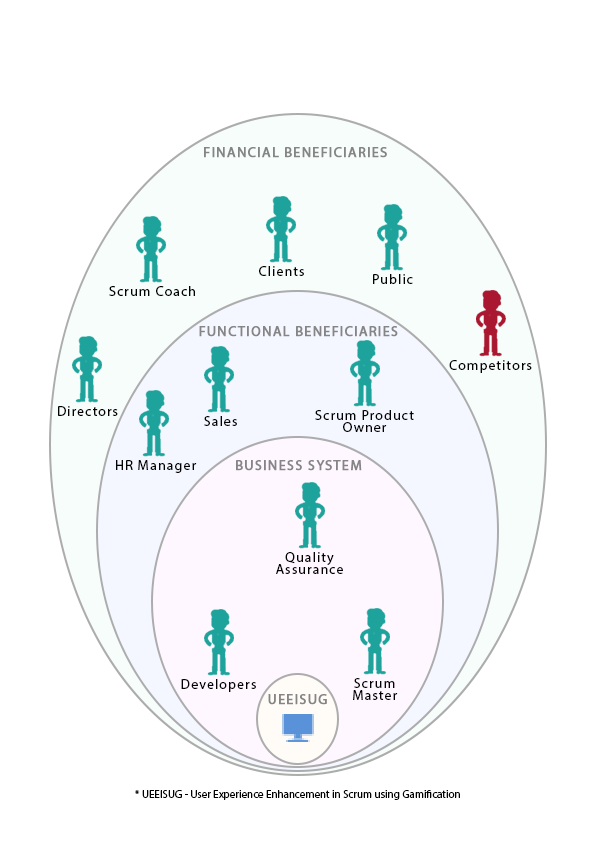
<style>
.page{position:relative;width:595px;height:842px;background:#ffffff}
.page>*{position:absolute;margin:0}
.t1{font:14px "MyriadPro-Regular";letter-spacing:0.075em;color:#858585;text-transform:uppercase;font-weight:bold}
.t2{font:14px "MyriadPro-Regular";letter-spacing:0.075em;color:#020202}
.t3{font:14px/12px "MyriadPro-Regular";letter-spacing:0.075em;color:#020202}
.t4{font:11px "MyriadPro-Regular";color:#020202}
.t5{font:11px "MyriadPro-Regular";color:#020202;text-transform:uppercase}
</style>
<div class="page">
<p class="t1" style="left:204px;top:147px;width:183px;height:11px">financial beneficiaries</p>
<p class="t2" style="left:259px;top:266px;width:45px;height:10px">Clients</p>
<p class="t2" style="left:373px;top:274px;width:40px;height:10px">Public</p>
<p class="t2" style="left:109px;top:286px;width:86px;height:10px">Scrum Coach</p>
<p class="t1" style="left:199px;top:326px;width:199px;height:11px">functional beneficiaries</p>
<p class="t2" style="left:449px;top:360px;width:83px;height:13px">Competitors</p>
<p class="t2" style="left:58px;top:406px;width:60px;height:10px">Directors</p>
<p class="t3" style="left:315px;top:410px;width:99px;height:22px;text-align:center">Scrum Product<br>Owner</p>
<p class="t2" style="left:204px;top:416px;width:33px;height:10px">Sales</p>
<p class="t2" style="left:116px;top:460px;width:81px;height:13px">HR Manager</p>
<p class="t1" style="left:236px;top:460px;width:126px;height:11px">Business System</p>
<p class="t3" style="left:276px;top:552px;width:67px;height:22px;text-align:center">Quality<br>Assurance</p>
<p class="t3" style="left:353px;top:678px;width:45px;height:22px;text-align:center">Scrum<br>Master</p>
<p class="t2" style="left:181px;top:679px;width:75px;height:13px">Developers</p>
<p class="t1" style="left:268px;top:694px;width:59px;height:11px">ueeisug</p>
<p class="t4" style="left:135px;top:790px;width:325px;height:10px"><span class="t5">* ueeisug - </span>User Experience Enhancement in Scrum using Gamification</p>
</div>
